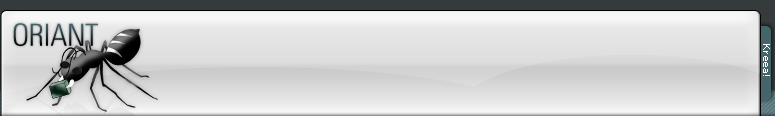
<style>
.page{position:relative;width:775px;height:120px}
.page>*{position:absolute;margin:0}
.t1{font:30.4px "ZurichBT-LightCondensed"}
.t2{font:10px "Verdana";color:#ffffff}
</style>
<div class="page">
<p class="t1" style="left:13px;top:23px;width:85px;height:23px">ORIANT</p>
<p class="t2" style="left:763px;top:44px;width:7px;height:32px;rotate:90deg">Kreea!</p>
</div>
